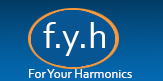
<style>
.page{position:relative;width:163px;height:81px;background:#075593}
.page>*{position:absolute;margin:0}
.t1{font:37px "Corbel";color:#ffffff}
.t2{font:13px "Corbel";color:#ffffff}
</style>
<div class="page">
<p class="t1" style="left:43px;top:22px;width:62px;height:34px">f.y.h</p>
<p class="t2" style="left:29px;top:69px;width:103px;height:9px">For Your Harmonics</p>
</div>
